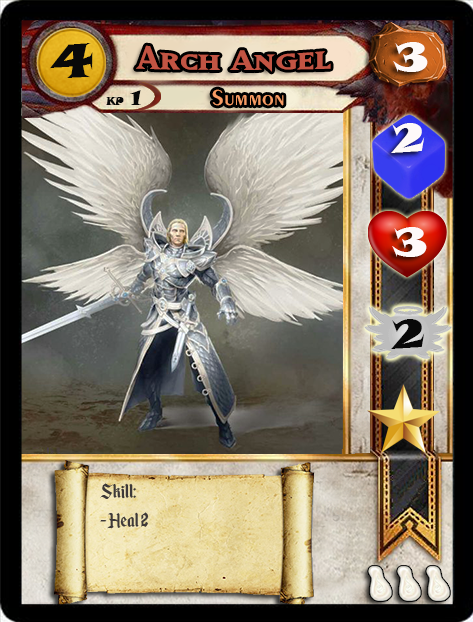
<style>
.page{position:relative;width:473px;height:622px}
.page>*{position:absolute;margin:0}
.t1{font:46.6px "SnapITC-Regular";color:#090909;scale:1.05 1}
.t2{font:40px "MatrixBoldSmallCaps";color:#c25443;scale:1.06 1}
.t3{font:40px "SnapITC-Regular";color:#fef9f9;scale:1.05 1}
.t4{font:22.7px "Exotic350BT-DemiBold";color:#f89c64;scale:1.06 1}
.t5{font:20.5px "SnapITC-Regular";color:#090909}
.t6{font:40px "SnapITC-Regular";color:#090909;scale:1.05 1}
.t7{font:24px "EnchantedLand";color:#3e3939}
</style>
<div class="page">
<p class="t1" style="left:50px;top:43px;width:43px;height:35px">4</p>
<p class="t2" style="left:136px;top:45px;width:195px;height:27px">Arch Angel</p>
<p class="t3" style="left:393px;top:42px;width:35px;height:30px">3</p>
<p class="t4" style="left:212px;top:89px;width:72px;height:17px">Summon</p>
<p class="t5" style="left:130px;top:90px;width:11px;height:15px">1</p>
<p class="t3" style="left:391px;top:123px;width:34px;height:30px">2</p>
<p class="t3" style="left:392px;top:227px;width:35px;height:30px">3</p>
<p class="t6" style="left:391px;top:319px;width:34px;height:30px">2</p>
<p class="t7" style="left:100px;top:483px;width:49px;height:46px">Skill:<br>- Heal 2</p>
</div>
